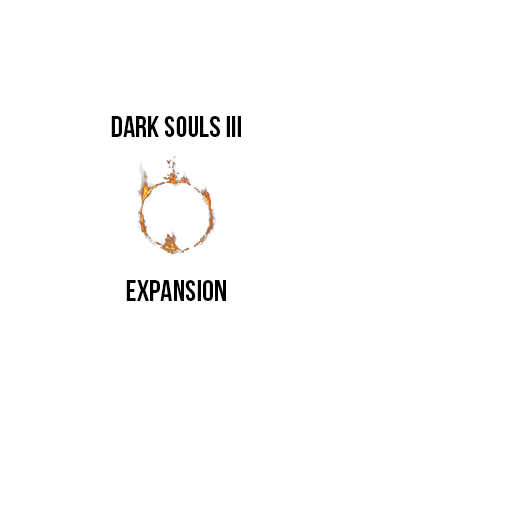
<style>
.page{position:relative;width:512px;height:512px;background:#ffffff}
.page>*{position:absolute;margin:0}
.t1{font:30px "BebasNeue";color:#000000}
</style>
<div class="page">
<p class="t1" style="left:111px;top:116px;width:130px;height:21px">dark souls III</p>
<p class="t1" style="left:126px;top:280px;width:100px;height:21px">expansion</p>
</div>
